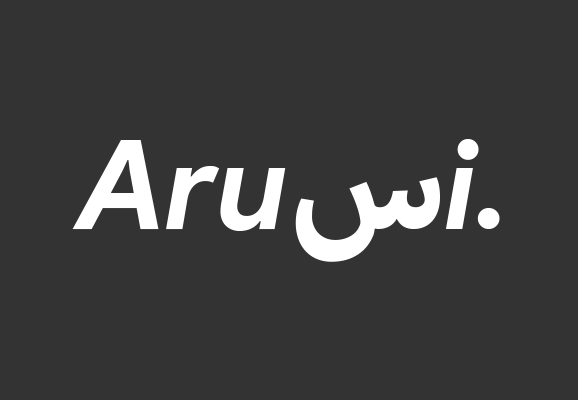
<style>
.page{position:relative;width:578px;height:400px;background:#333333}
.page>*{position:absolute;margin:0}
.t1{font:123.8px "ProductSans-BoldItalic";color:#ffffff}
.t2{font:202.8px "MyriadArabic-Bold";color:#ffffff}
</style>
<div class="page">
<p class="t1" style="left:72px;top:139px;width:428px;height:123px">Aru<span class="t2">س</span>i.</p>
</div>
